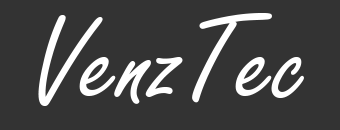
<style>
.page{position:relative;width:340px;height:130px;background:#333333}
.page>*{position:absolute;margin:0}
.t1{font:130px "FreestyleScript-Regular";color:#ffffff}
</style>
<div class="page">
<p class="t1" style="left:38px;top:13px;width:266px;height:93px">VenzTec</p>
</div>
